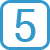
<style>
.page{position:relative;width:50px;height:50px;background:#ffffff}
.page>*{position:absolute;margin:0}
.t1{font:45.8px "Roboto-Regular";color:#3399cc}
</style>
<div class="page">
<p class="t1" style="left:15px;top:9px;width:21px;height:33px">5</p>
</div>
